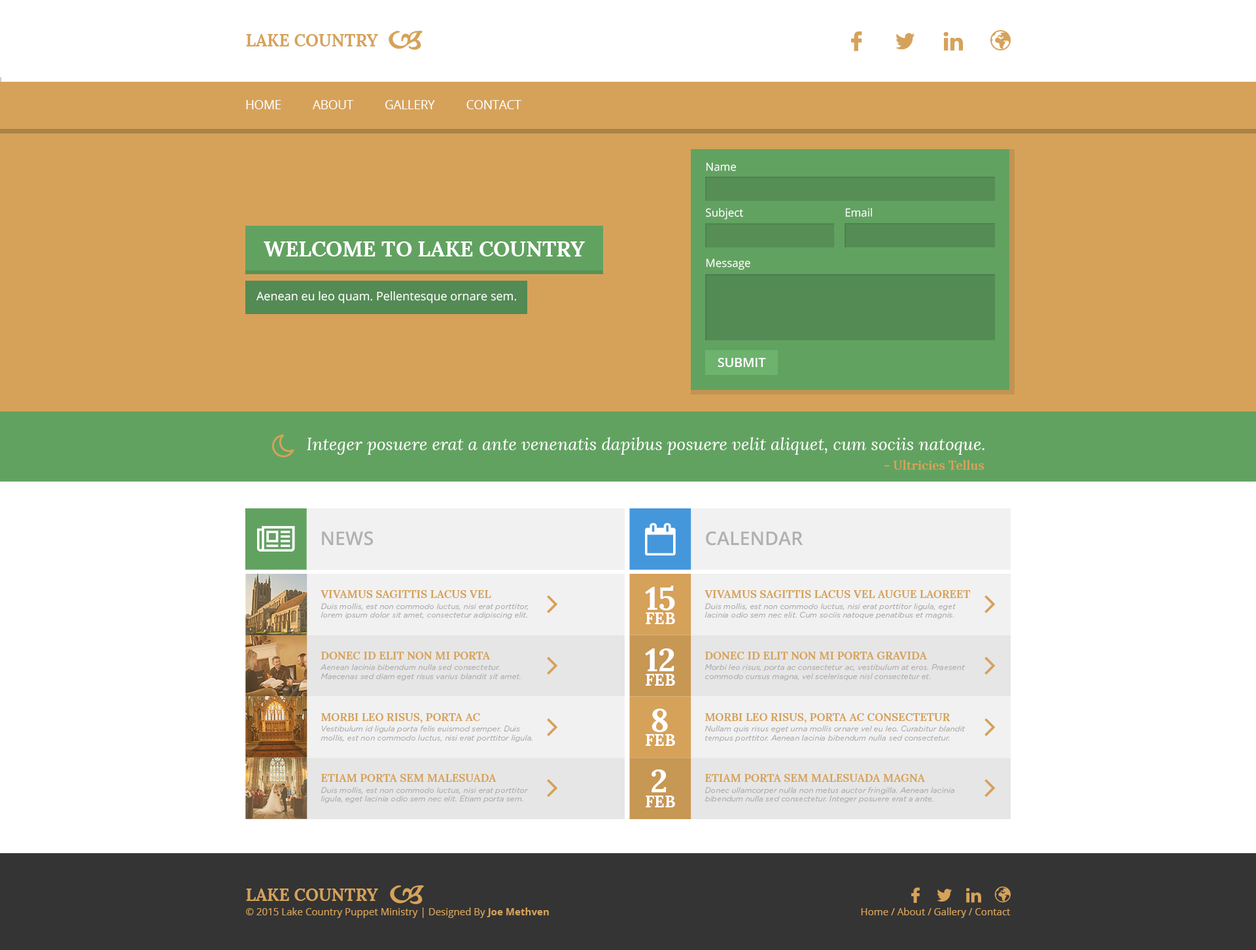
<style>
.page{position:relative;width:1256px;height:950px;background:#ffffff}
.page>*{position:absolute;margin:0}
.t1{font:16.9px "Lora-Bold";color:#d6a25a}
.t2{font:12.1px "OpenSans";color:#ffffff}
.t3{font:11.1px "OpenSans";color:#ffffff}
.t4{font:21.3px "Lora-Bold";color:#ffffff}
.t5{font:11.8px "OpenSans";color:#ffffff}
.t6{font:12.8px "OpenSans-Semibold";color:#ffffff}
.t7{font:17.3px "Lora-Italic";color:#ffffff}
.t8{font:12.5px "Lora-Bold";color:#d6a25a}
.t9{font:18.8px "OpenSans-Semibold";color:#b0b0b0;text-transform:uppercase}
.t10{font:11px "Lora-Bold";color:#d6a259;text-transform:uppercase}
.t11{font:32.4px "Lora-Bold";color:#ffffff}
.t12{font:7.6px/8.8px "GothamRounded-BookItalic";color:#b0b0b0}
.t13{font:16.1px "Lora-Bold";color:#ffffff}
.t14{font:9.9px "OpenSans";color:#d6a25a}
.t15{font:9.9px "OpenSans-Bold";color:#d6a25a}
</style>
<div class="page">
<p class="t1" style="left:246px;top:34px;width:132px;height:12px">LAKE COUNTRY</p>
<p class="t2" style="left:246px;top:100px;width:275px;height:9px">HOME          ABOUT          GALLERY          CONTACT</p>
<p class="t3" style="left:706px;top:162px;width:30px;height:9px">Name</p>
<p class="t3" style="left:706px;top:208px;width:38px;height:12px">Subject</p>
<p class="t3" style="left:845px;top:208px;width:27px;height:9px">Email</p>
<p class="t4" style="left:264px;top:241px;width:321px;height:16px">WELCOME TO LAKE COUNTRY</p>
<p class="t3" style="left:706px;top:258px;width:44px;height:12px">Message</p>
<p class="t5" style="left:256px;top:291px;width:260px;height:12px">Aenean eu leo quam. Pellentesque ornare sem.</p>
<p class="t6" style="left:717px;top:358px;width:49px;height:9px">SUBMIT</p>
<p class="t7" style="left:307px;top:437px;width:677px;height:18px">Integer posuere erat a ante venenatis dapibus posuere velit aliquet, cum sociis natoque.</p>
<p class="t8" style="left:884px;top:460px;width:100px;height:10px">- Ultricies Tellus</p>
<p class="t9" style="left:322px;top:531px;width:51px;height:14px">NEWS</p>
<p class="t9" style="left:706px;top:531px;width:96px;height:14px">CALENDAR</p>
<p class="t10" style="left:320px;top:590px;width:171px;height:8px">Vivamus sagittis lacus vel</p>
<p class="t11" style="left:645px;top:585px;width:30px;height:25px">15</p>
<p class="t10" style="left:704px;top:590px;width:266px;height:8px">Vivamus sagittis lacus vel augue laoreet</p>
<p class="t12" style="left:320px;top:603px;width:208px;height:16px">Duis mollis, est non commodo luctus, nisi erat porttitor,<br>lorem ipsum dolor sit amet, consectetur adipiscing elit.</p>
<p class="t12" style="left:704px;top:603px;width:252px;height:16px">Duis mollis, est non commodo luctus, nisi erat porttitor ligula, eget <br>lacinia odio sem nec elit. Cum sociis natoque penatibus et magnis.</p>
<p class="t13" style="left:646px;top:612px;width:29px;height:12px">FEB</p>
<p class="t10" style="left:321px;top:651px;width:169px;height:9px">Donec id elit non mi porta</p>
<p class="t11" style="left:645px;top:648px;width:29px;height:23px">12</p>
<p class="t10" style="left:705px;top:651px;width:222px;height:9px">Donec id elit non mi porta gravida</p>
<p class="t12" style="left:320px;top:664px;width:201px;height:16px">Aenean lacinia bibendum nulla sed consectetur. <br>Maecenas sed diam eget risus varius blandit sit amet.</p>
<p class="t12" style="left:705px;top:664px;width:260px;height:16px">Morbi leo risus, porta ac consectetur ac, vestibulum at eros. Praesent <br>commodo cursus magna, vel scelerisque nisl consectetur et.</p>
<p class="t13" style="left:646px;top:674px;width:29px;height:11px">FEB</p>
<p class="t10" style="left:321px;top:713px;width:159px;height:10px">Morbi leo risus, porta ac</p>
<p class="t11" style="left:651px;top:708px;width:17px;height:24px">8</p>
<p class="t10" style="left:705px;top:713px;width:245px;height:10px">Morbi leo risus, porta ac consectetur</p>
<p class="t12" style="left:320px;top:725px;width:212px;height:17px">Vestibulum id ligula porta felis euismod semper. Duis <br>mollis, est non commodo luctus, nisi erat porttitor ligula.</p>
<p class="t12" style="left:704px;top:725px;width:261px;height:17px">Nullam quis risus eget urna mollis ornare vel eu leo. Curabitur blandit <br>tempus porttitor. Aenean lacinia bibendum nulla sed consectetur.</p>
<p class="t13" style="left:646px;top:734px;width:29px;height:12px">FEB</p>
<p class="t10" style="left:321px;top:774px;width:175px;height:8px">Etiam porta sem malesuada</p>
<p class="t11" style="left:651px;top:769px;width:15px;height:23px">2</p>
<p class="t10" style="left:705px;top:774px;width:220px;height:8px">Etiam porta sem malesuada magna</p>
<p class="t12" style="left:320px;top:787px;width:208px;height:15px">Duis mollis, est non commodo luctus, nisi erat porttitor <br>ligula, eget lacinia odio sem nec elit. Etiam porta sem.</p>
<p class="t13" style="left:646px;top:795px;width:29px;height:12px">FEB</p>
<p class="t12" style="left:704px;top:787px;width:250px;height:15px">Donec ullamcorper nulla non metus auctor fringilla. Aenean lacinia <br>bibendum nulla sed consectetur. Integer posuere erat a ante.</p>
<p class="t1" style="left:246px;top:888px;width:132px;height:13px">LAKE COUNTRY</p>
<p class="t14" style="left:246px;top:907px;width:303px;height:11px">© 2015 Lake Country Puppet Ministry | Designed By <span class="t15">Joe Methven</span></p>
<p class="t14" style="left:861px;top:907px;width:149px;height:11px">Home / About / Gallery / Contact</p>
</div>
